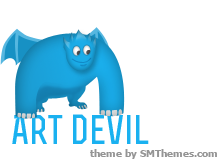
<style>
.page{position:relative;width:217px;height:167px;background:#ffffff}
.page>*{position:absolute;margin:0}
.t1{font:39.3px "RexBold";color:#1ab1f0}
.t2{font:10px "Tahoma-Bold";color:#959595}
</style>
<div class="page">
<p class="t1" style="left:12px;top:114px;width:137px;height:30px">Art devil</p>
<p class="t2" style="left:90px;top:149px;width:127px;height:10px">theme by SMThemes.com</p>
</div>
